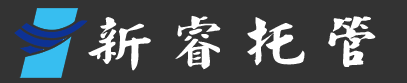
<style>
.page{position:relative;width:407px;height:83px;background:#333333}
.page>*{position:absolute;margin:0}
.t1{font:65px "By-JOSSQ-DMF-in-BeiJing";color:#ffffff;scale:1.18 1}
</style>
<div class="page">
<p class="t1" style="left:88px;top:15px;width:288px;height:56px">新睿托管</p>
</div>
